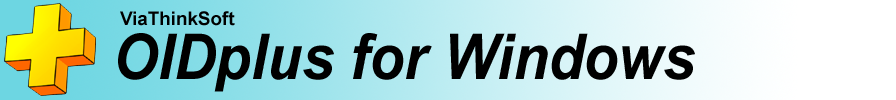
<style>
.page{position:relative;width:896px;height:100px}
.page>*{position:absolute;margin:0}
.t1{font:18.8px "Arial-BoldMT";color:#000000}
.t2{font:63.2px "Arial-BoldItalicMT";color:#000000;scale:0.91 1}
</style>
<div class="page">
<p class="t1" style="left:120px;top:11px;width:115px;height:15px">ViaThinkSoft</p>
<p class="t2" style="left:118px;top:33px;width:577px;height:59px">OIDplus for Windows</p>
</div>
